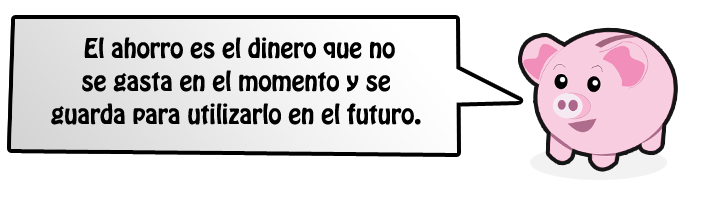
<style>
.page{position:relative;width:709px;height:200px;background:#ffffff}
.page>*{position:absolute;margin:0}
.t1{font:24px/33px "HoboStd";color:#000000}
</style>
<div class="page">
<p class="t1" style="left:51px;top:37px;width:370px;height:88px;text-align:center">El ahorro es el dinero que no<br>se gasta en el momento y se<br>guarda para utilizarlo en el futuro.</p>
</div>
